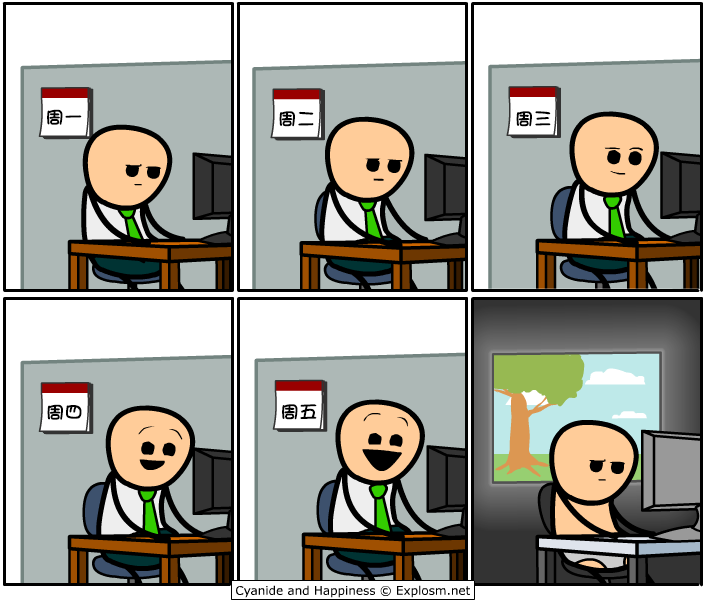
<style>
.page{position:relative;width:708px;height:610px;background:#adb8b6}
.page>*{position:absolute;margin:0}
.t1{font:18px "DFShaoNvW5";color:#000000;font-weight:bold}
</style>
<div class="page">
<p class="t1" style="left:47px;top:109px;width:35px;height:16px">周一</p>
<p class="t1" style="left:279px;top:111px;width:35px;height:16px">周二</p>
<p class="t1" style="left:516px;top:111px;width:35px;height:16px">周三</p>
<p class="t1" style="left:47px;top:404px;width:35px;height:16px">周四</p>
<p class="t1" style="left:282px;top:404px;width:35px;height:16px">周五</p>
</div>
